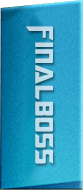
<style>
.page{position:relative;width:83px;height:190px}
.page>*{position:absolute;margin:0}
.t1{font:25.2px "Megatron";color:#c1deeb}
</style>
<div class="page">
<p class="t1" style="left:26px;top:26px;width:27px;height:138px;rotate:90deg">Finalboss</p>
</div>
